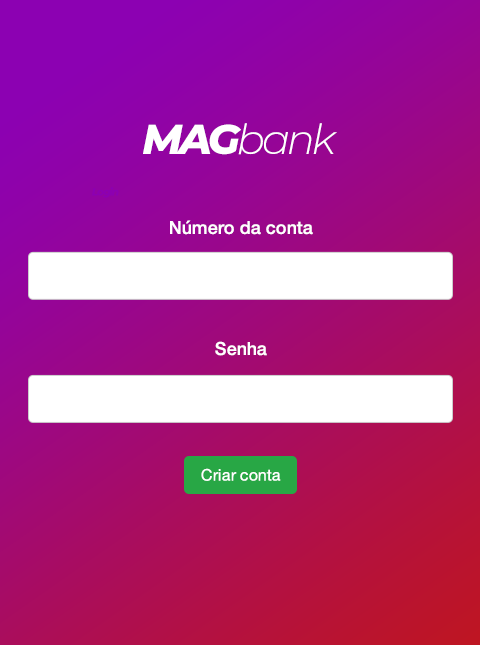
<style>
.page{position:relative;width:480px;height:645px}
.page>*{position:absolute;margin:0}
.t1{font:41.9px "Montserrat-LightItalic";letter-spacing:-0.075em;color:#ffffff}
.t2{font:41.9px "Montserrat-ExtraBoldItalic";letter-spacing:-0.075em;color:#ffffff}
.t3{font:10.5px "Montserrat-ExtraBoldItalic";letter-spacing:-0.075em;color:#8c00b2}
.t4{font:18px "HelveticaNeue-Medium";color:#ffffff}
.t5{font:16px "HelveticaNeue";color:#ffffff}
</style>
<div class="page">
<p class="t1" style="left:143px;top:123px;width:194px;height:32px"><span class="t2">MAG</span>bank</p>
<p class="t3" style="left:92px;top:187px;width:27px;height:11px">Login</p>
<p class="t4" style="left:170px;top:220px;width:143px;height:15px">Número da conta</p>
<p class="t4" style="left:215px;top:341px;width:52px;height:15px">Senha</p>
<p class="t5" style="left:201px;top:468px;width:80px;height:13px">Criar conta</p>
</div>
